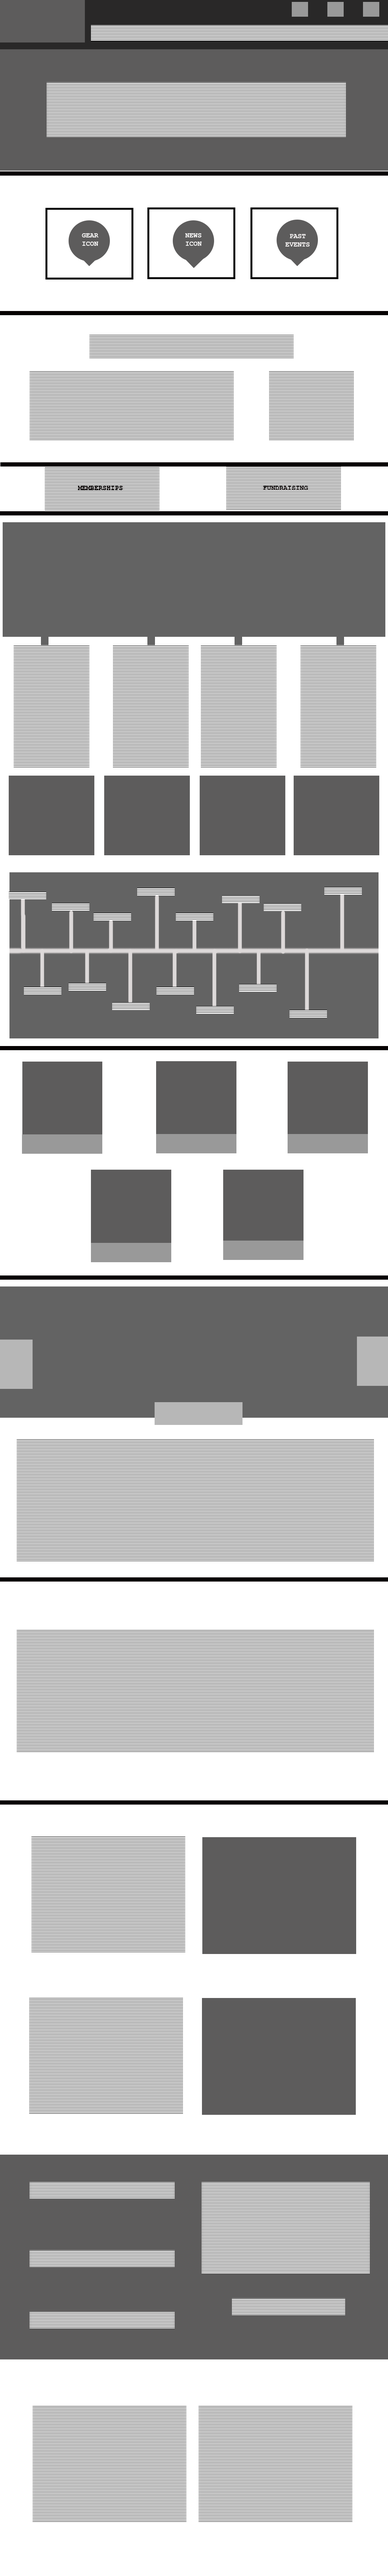
<style>
.page{position:relative;width:388px;height:2576px;background:#ffffff}
.page>*{position:absolute;margin:0}
.t1{font:6.8px "CourierNewPS-BoldMT";color:#fbfafa}
.t2{font:6.8px "CourierNewPS-BoldMT";color:#faf7f7}
.t3{font:6.8px "CourierNewPS-BoldMT";color:#060000}
</style>
<div class="page">
<p class="t1" style="left:82px;top:233px;width:17px;height:13px">GEAR<br>ICON</p>
<p class="t1" style="left:185px;top:233px;width:17px;height:13px">NEWS<br>ICON</p>
<p class="t2" style="left:286px;top:234px;width:24px;height:13px;text-align:center">PAST <br>EVENTS</p>
<p class="t3" style="left:78px;top:486px;width:45px;height:4px">MEMBERSHIPS</p>
<p class="t3" style="left:263px;top:486px;width:45px;height:4px">FUNDRAISING</p>
</div>
